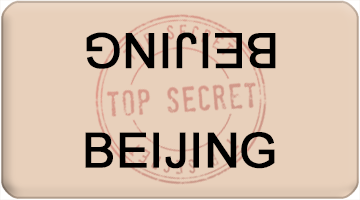
<style>
.page{position:relative;width:360px;height:200px;background:#e8d0bb}
.page>*{position:absolute;margin:0}
.t1{font:48px "ArialMT";color:#000000;font-weight:bold}
</style>
<div class="page">
<p class="t1" style="left:86px;top:32px;width:190px;height:37px;rotate:180deg">BEIJING</p>
<p class="t1" style="left:85px;top:132px;width:190px;height:37px">BEIJING</p>
</div>
